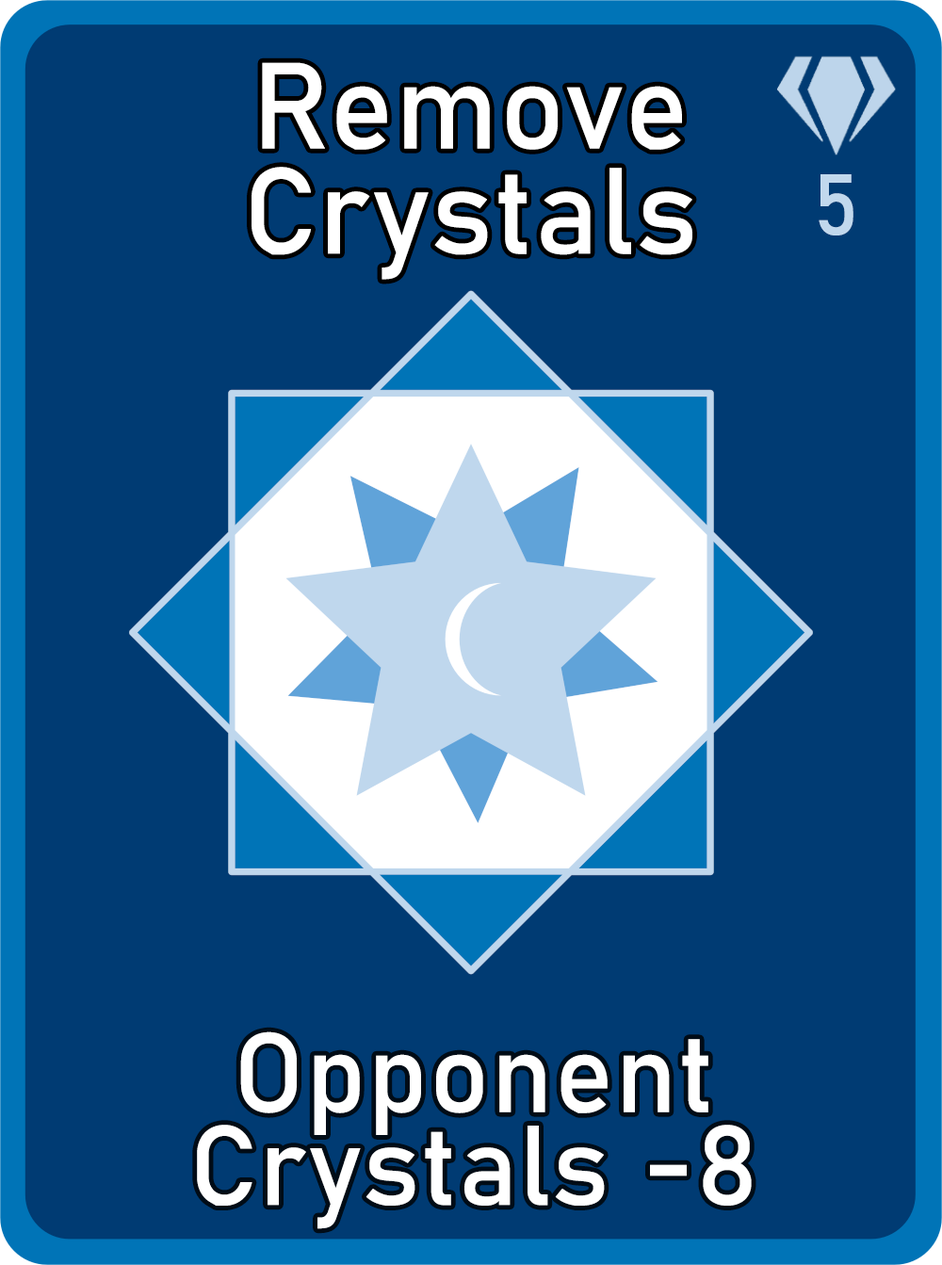
<style>
.page{position:relative;width:942px;height:1265px;background:#003b73}
.page>*{position:absolute;margin:0}
.t1{font:120.6px/105.1px "Bahnschrift";letter-spacing:0.01em;color:#ffffff}
.t2{font:85px "Bahnschrift";letter-spacing:0.01em;color:#c1d8ed}
.t3{font:111.3px/92.7px "Bahnschrift";letter-spacing:0.01em;color:#ffffff}
</style>
<div class="page">
<p class="t1" style="left:252px;top:62px;width:441px;height:218px;text-align:center">Remove<br>Crystals</p>
<p class="t2" style="left:819px;top:174px;width:35px;height:62px">5</p>
<p class="t3" style="left:197px;top:1032px;width:555px;height:198px;text-align:center">Opponent<br>Crystals -8</p>
</div>
